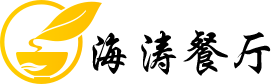
<style>
.page{position:relative;width:278px;height:84px;background:#ffffff}
.page>*{position:absolute;margin:0}
.t1{font:48px "STXingkai";color:#000000}
</style>
<div class="page">
<p class="t1" style="left:92px;top:30px;width:179px;height:46px">海涛餐厅</p>
</div>
